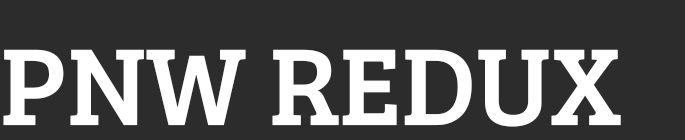
<style>
.page{position:relative;width:685px;height:140px;background:#2c2c2c}
.page>*{position:absolute;margin:0}
.t1{font:112.9px "BreeSerif-Regular";color:#ffffff}
</style>
<div class="page">
<p class="t1" style="left:3px;top:49px;width:618px;height:78px">PNW REDUX</p>
</div>
